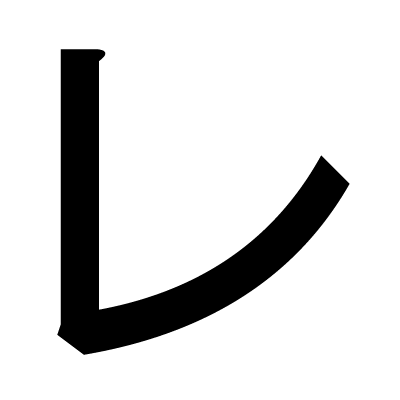
<style>
.page{position:relative;width:400px;height:400px;background:#ffffff}
.page>*{position:absolute;margin:0}
.t1{font:424.8px "MS-PGothic";color:#000000}
</style>
<div class="page">
<p class="t1" style="left:57px;top:49px;width:293px;height:306px">レ</p>
</div>
